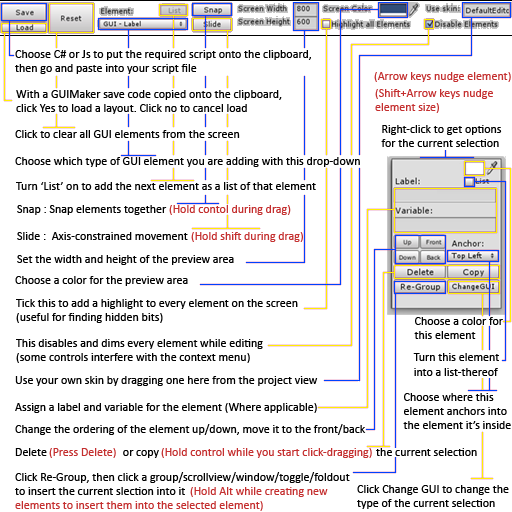
<style>
.page{position:relative;width:512px;height:512px;background:#ffffff}
.page>*{position:absolute;margin:0}
.t1{font:12px "Calibri";color:#000000}
.t2{font:12px "Calibri";color:#c42f2f}
</style>
<div class="page">
<p class="t1" style="left:15px;top:50px;width:296px;height:24px">Choose C# or Js to put the required script onto the clipboard,<br>then go and paste into your script file</p>
<p class="t2" style="left:374px;top:72px;width:137px;height:10px">(Arrow keys nudge element)</p>
<p class="t2" style="left:375px;top:89px;width:118px;height:24px">(Shift+Arrow keys nudge<br>element size)</p>
<p class="t1" style="left:16px;top:90px;width:266px;height:24px">With a GUIMaker save code copied onto the clipboard,<br>click Yes to load a layout. Click no to cancel load</p>
<p class="t1" style="left:381px;top:125px;width:121px;height:22px">Right-click to get options<br>for the current selection</p>
<p class="t1" style="left:15px;top:130px;width:225px;height:8px">Click to clear all GUI elements from the screen</p>
<p class="t1" style="left:15px;top:157px;width:345px;height:10px">Choose which type of GUI element you are adding with this drop-down</p>
<p class="t1" style="left:16px;top:182px;width:300px;height:8px">Turn ‘List’ on to add the next element as a list of that element</p>
<p class="t1" style="left:17px;top:205px;width:150px;height:10px">Snap : Snap elements together</p>
<p class="t2" style="left:169px;top:205px;width:122px;height:10px">(Hold contol during drag)</p>
<p class="t1" style="left:17px;top:232px;width:171px;height:8px">Slide :  Axis-constrained movement</p>
<p class="t2" style="left:191px;top:232px;width:112px;height:10px">(Hold shift during drag)</p>
<p class="t1" style="left:17px;top:255px;width:217px;height:10px">Set the width and height of the preview area</p>
<p class="t1" style="left:15px;top:276px;width:173px;height:10px">Choose a color for the preview area</p>
<p class="t1" style="left:16px;top:299px;width:282px;height:24px">Tick this to add a highlight to every element on the screen<br>(useful for finding hidden bits)</p>
<p class="t1" style="left:414px;top:317px;width:89px;height:22px">Choose a color for<br>this element</p>
<p class="t1" style="left:16px;top:339px;width:247px;height:24px">This disables and dims every element while editing<br>(some controls interfere with the context menu)</p>
<p class="t1" style="left:413px;top:353px;width:86px;height:23px">Turn this element<br>into a list-thereof</p>
<p class="t1" style="left:15px;top:376px;width:303px;height:10px">Use your own skin by dragging one here from the project view</p>
<p class="t1" style="left:403px;top:393px;width:108px;height:36px">Choose where this<br>element anchors into<br>the element it’s inside</p>
<p class="t1" style="left:15px;top:403px;width:302px;height:10px">Assign a label and variable for the element (Where applicable)</p>
<p class="t1" style="left:15px;top:424px;width:351px;height:11px">Change the ordering of the element up/down, move it to the front/back</p>
<p class="t1" style="left:15px;top:448px;width:462px;height:10px">Delete                            or copy                                                                                the current selection</p>
<p class="t2" style="left:49px;top:448px;width:67px;height:10px">(Press Delete)</p>
<p class="t2" style="left:161px;top:448px;width:211px;height:10px">(Hold control while you start click-dragging)</p>
<p class="t1" style="left:15px;top:472px;width:335px;height:23px">Click Re-Group, then click a group/scrollview/window/toggle/foldout<br>to insert the current slection into it</p>
<p class="t1" style="left:357px;top:485px;width:152px;height:24px">Click Change GUI to change the<br>type of the current selection</p>
<p class="t2" style="left:190px;top:487px;width:138px;height:10px">(Hold Alt while creating new</p>
<p class="t2" style="left:15px;top:501px;width:248px;height:10px">elements to insert them into the selected element)</p>
</div>
